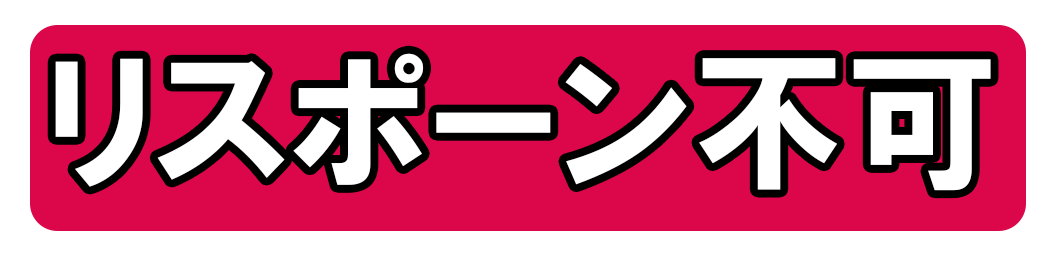
<style>
.page{position:relative;width:1054px;height:254px;background:#db074a}
.page>*{position:absolute;margin:0}
.t1{font:150px "HGPSoeiKakugothicUB";letter-spacing:0.025em;color:#ffffff}
</style>
<div class="page">
<p class="t1" style="left:55px;top:53px;width:936px;height:138px">リスポーン不可</p>
</div>
